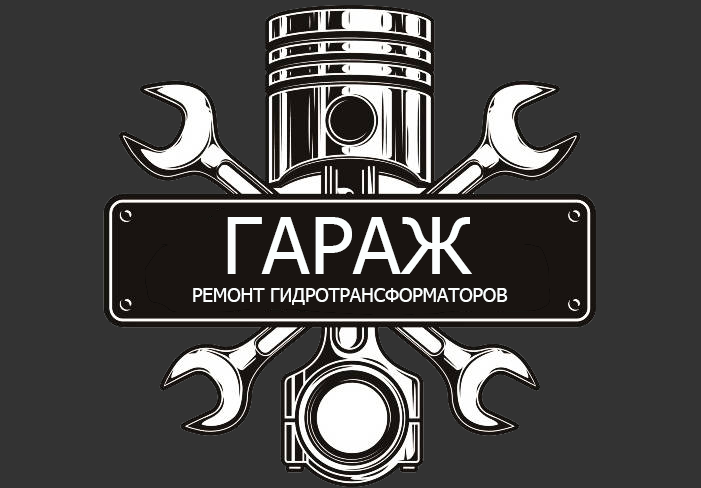
<style>
.page{position:relative;width:701px;height:488px;background:#333333}
.page>*{position:absolute;margin:0}
.t1{font:79.2px "Tahoma";color:#fbfefe}
.t2{font:18.8px "Tahoma";color:#fbfefe}
</style>
<div class="page">
<p class="t1" style="left:227px;top:217px;width:245px;height:57px">ГАРАЖ</p>
<p class="t2" style="left:193px;top:288px;width:315px;height:17px">РЕМОНТ ГИДРОТРАНСФОРМАТОРОВ</p>
</div>
